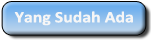
<style>
.page{position:relative;width:151px;height:41px}
.page>*{position:absolute;margin:0}
.t1{font:16px "Calibri-Bold";color:#f6f6f6;scale:1.11 1}
</style>
<div class="page">
<p class="t1" style="left:14px;top:11px;width:119px;height:15px">Yang Sudah Ada</p>
</div>
